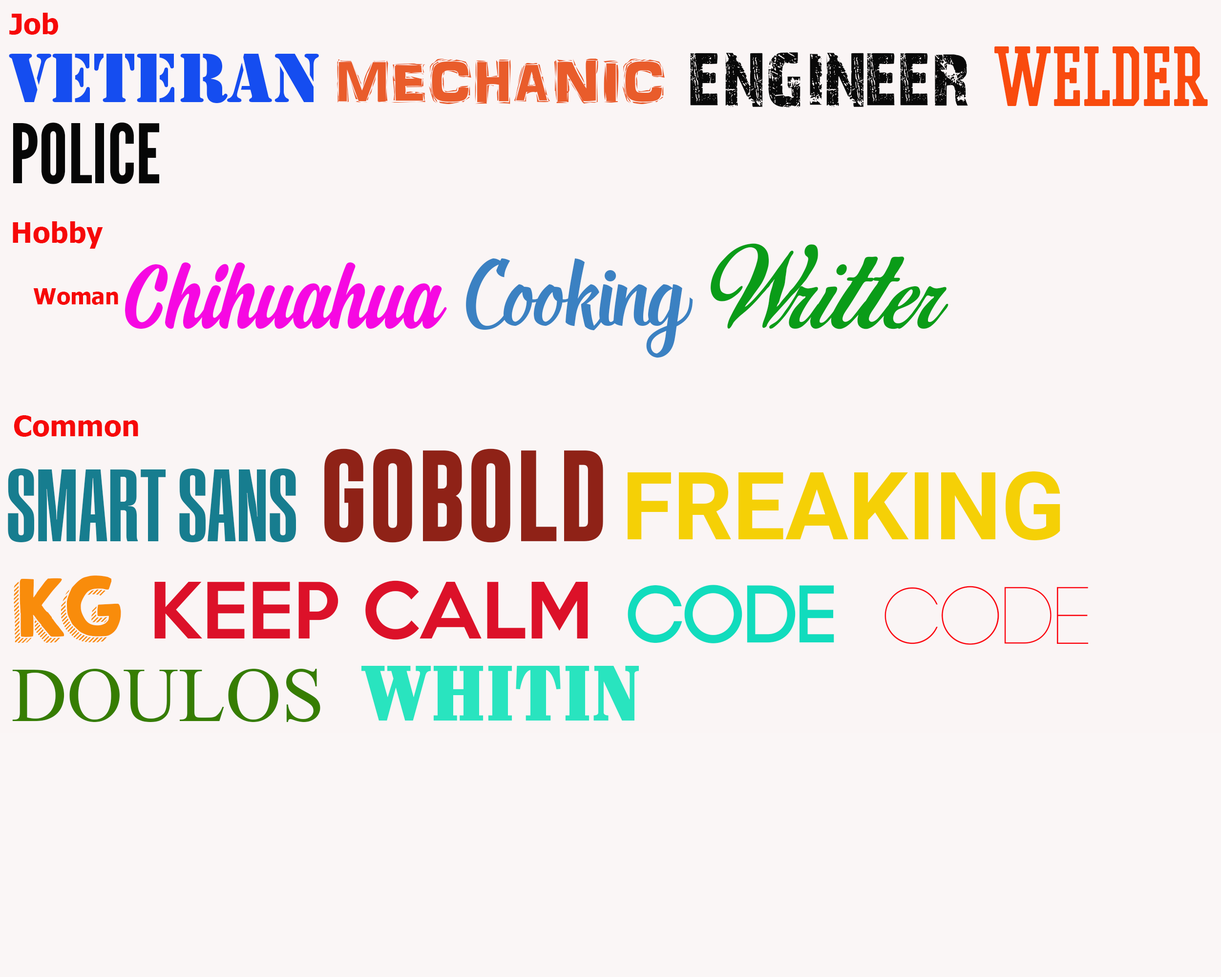
<style>
.page{position:relative;width:1221px;height:977px;background:#faf5f5}
.page>*{position:absolute;margin:0}
.t1{font:28.5px "Tahoma-Bold";color:#f60909}
.t2{font:64.5px "StencilStd";color:#154df0}
.t3{font:73.1px "28DaysLater";color:#080808}
.t4{font:59.8px "PROMESH-Regular";color:#f94b0e}
.t5{font:61.3px "ARDARLING";color:#e95c2b}
.t6{font:81.7px "LeagueGothic-Regular";color:#060606}
.t7{font:102px "BirdsofParadise";color:#0a9c18}
.t8{font:96.6px "SVN-Steady";color:#f608e2}
.t9{font:117px "SVN-DeadheadScript";color:#3b81c2}
.t10{font:22.4px "Tahoma-Bold";color:#f60909}
.t11{font:92.7px "GoboldBold";color:#8f2217}
.t12{font:105.3px "SmartSansStd-Light";color:#177d8f}
.t13{font:94.2px "Asimov";color:#f5d006}
.t14{font:70.8px "KGHAPPY";color:#f98c0b}
.t15{font:70.7px "KeepCalm-Medium";color:#dc1129}
.t16{font:81.2px "Code-Bold";color:#11dcbd}
.t17{font:81.2px "Code-Light";color:#fb0611}
.t18{font:86px "Whitin-CondensedBlack";color:#29e4bf}
.t19{font:77.2px "DoulosSIL";color:#367d02}
</style>
<div class="page">
<p class="t1" style="left:9px;top:13px;width:49px;height:22px">Job</p>
<p class="t2" style="left:9px;top:53px;width:310px;height:50px">VETERAN</p>
<p class="t3" style="left:690px;top:52px;width:278px;height:55px">ENGINEER</p>
<p class="t4" style="left:994px;top:46px;width:214px;height:60px">WELDER</p>
<p class="t5" style="left:337px;top:59px;width:328px;height:45px">MECHANIC</p>
<p class="t6" style="left:13px;top:122px;width:146px;height:62px">POLICE</p>
<p class="t1" style="left:13px;top:221px;width:90px;height:28px">Hobby</p>
<p class="t7" style="left:711px;top:243px;width:237px;height:86px">Writter</p>
<p class="t8" style="left:125px;top:262px;width:322px;height:67px">Chihuahua</p>
<p class="t9" style="left:466px;top:258px;width:227px;height:99px">Cooking</p>
<p class="t10" style="left:33px;top:288px;width:85px;height:17px">Woman</p>
<p class="t1" style="left:14px;top:415px;width:124px;height:22px">Common</p>
<p class="t11" style="left:324px;top:448px;width:279px;height:95px">GOBOLD</p>
<p class="t12" style="left:8px;top:468px;width:288px;height:74px">SMART SANS</p>
<p class="t13" style="left:628px;top:471px;width:432px;height:69px">FREAKING</p>
<p class="t14" style="left:14px;top:575px;width:107px;height:68px">KG</p>
<p class="t15" style="left:154px;top:580px;width:434px;height:60px">KEEP CALM</p>
<p class="t16" style="left:628px;top:585px;width:206px;height:58px">CODE</p>
<p class="t17" style="left:884px;top:586px;width:205px;height:59px">CODE</p>
<p class="t18" style="left:361px;top:665px;width:278px;height:55px">WHITIN</p>
<p class="t19" style="left:12px;top:669px;width:308px;height:53px">DOULOS</p>
</div>
